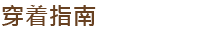
<style>
.page{position:relative;width:204px;height:32px;background:#ffffff}
.page>*{position:absolute;margin:0}
.t1{font:24px "MicrosoftJhengHeiBold";color:#684121}
</style>
<div class="page">
<p class="t1" style="left:2px;top:5px;width:94px;height:21px">穿着指南</p>
</div>
